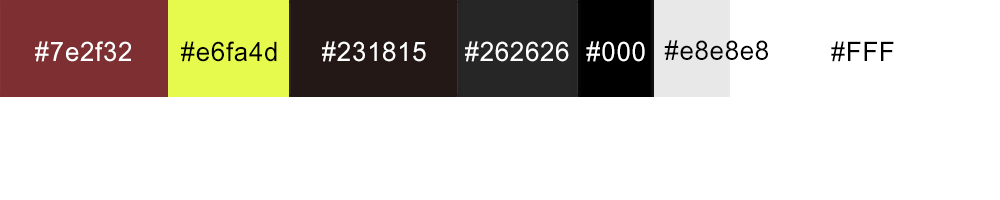
<style>
.page{position:relative;width:1000px;height:200px;background:#ffffff}
.page>*{position:absolute;margin:0}
.t1{font:26.7px "ArialUnicodeMS";letter-spacing:0.03em;color:#ffffff;scale:0.96 1}
.t2{font:26.7px "ArialUnicodeMS";letter-spacing:0.03em;color:#000000;scale:0.96 1}
</style>
<div class="page">
<p class="t1" style="left:35px;top:41px;width:96px;height:21px">#7e2f32</p>
<p class="t2" style="left:181px;top:41px;width:96px;height:21px">#e6fa4d</p>
<p class="t1" style="left:322px;top:41px;width:104px;height:21px">#231815</p>
<p class="t1" style="left:465px;top:41px;width:104px;height:21px">#262626</p>
<p class="t1" style="left:586px;top:41px;width:59px;height:21px">#000</p>
<p class="t2" style="left:664px;top:40px;width:104px;height:20px">#e8e8e8</p>
<p class="t2" style="left:831px;top:41px;width:63px;height:21px">#FFF</p>
</div>
